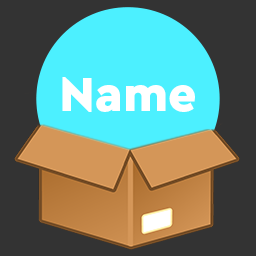
<style>
.page{position:relative;width:256px;height:256px;background:#333333}
.page>*{position:absolute;margin:0}
.t1{font:50.1px "CeraPro-Black";color:#ffffff}
</style>
<div class="page">
<p class="t1" style="left:62px;top:77px;width:133px;height:35px">Name</p>
</div>
